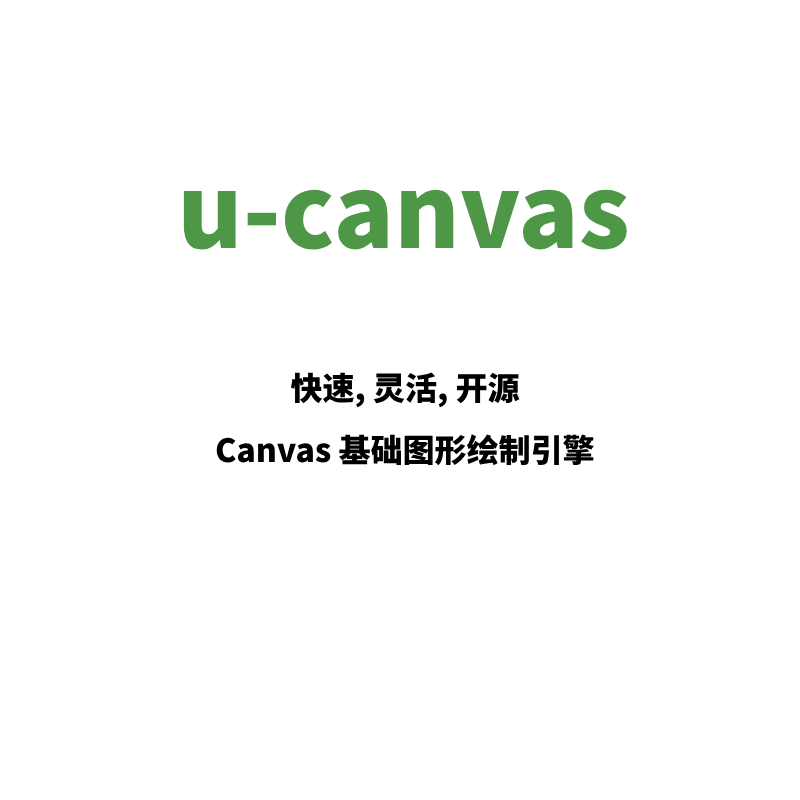
<style>
.page{position:relative;width:800px;height:800px;background:#ffffff}
.page>*{position:absolute;margin:0}
.t1{font:100px "SourceHanSansSC-Heavy";color:#4e9746}
.t2{font:32px "SourceHanSansSC-Heavy";color:#000000}
</style>
<div class="page">
<p class="t1" style="left:183px;top:189px;width:444px;height:61px">u-canvas</p>
<p class="t2" style="left:290px;top:372px;width:230px;height:36px">快速, 灵活, 开源</p>
<p class="t2" style="left:216px;top:434px;width:378px;height:32px">Canvas 基础图形绘制引擎</p>
</div>
